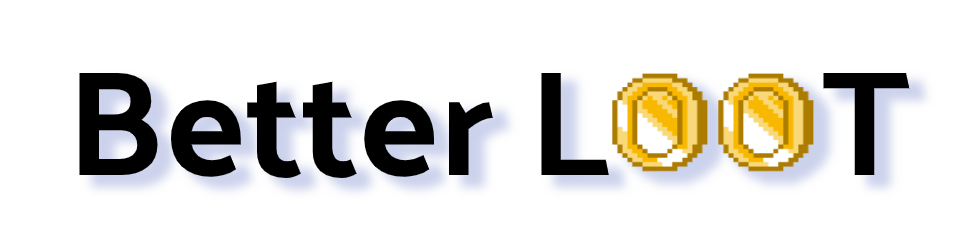
<style>
.page{position:relative;width:970px;height:250px;background:#ffffff}
.page>*{position:absolute;margin:0}
.t1{font:150px "PalanquinDark-Regular";color:#000000}
</style>
<div class="page">
<p class="t1" style="left:79px;top:73px;width:831px;height:105px">Better L      T</p>
</div>
